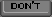
<style>
.page{position:relative;width:52px;height:17px}
.page>*{position:absolute;margin:0}
.t1{font:8.5px "RetroComputer";color:#000000}
</style>
<div class="page">
<p class="t1" style="left:11px;top:1px;width:29px;height:8px">DON'T</p>
</div>
